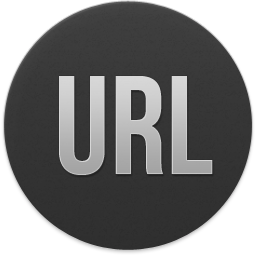
<style>
.page{position:relative;width:256px;height:256px;background:#ffffff}
.page>*{position:absolute;margin:0}
.t1{font:139.7px "BebasNeue"}
</style>
<div class="page">
<p class="t1" style="left:59px;top:76px;width:154px;height:99px">url</p>
</div>
